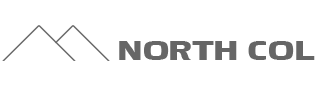
<style>
.page{position:relative;width:323px;height:90px;background:#ffffff}
.page>*{position:absolute;margin:0}
.t1{font:34.1px "Pakenham";letter-spacing:-0.02em;color:#666666;scale:2 1}
</style>
<div class="page">
<p class="t1" style="left:119px;top:41px;width:196px;height:19px">NORTH COL</p>
</div>
